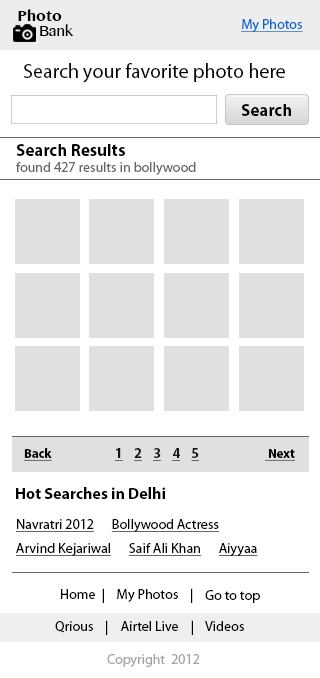
<style>
.page{position:relative;width:320px;height:678px;background:#ffffff}
.page>*{position:absolute;margin:0}
.t1{font:14.7px/15.5px "TamilMN-Bold";color:#000000}
.t2{font:14.7px/15.5px "TamilMN";color:#000000}
.t3{font:14px "MyriadPro-Regular";color:#0066cc;text-decoration:underline}
.t4{font:20px "MyriadPro-Regular";color:#000000}
.t5{font:17px "MyriadPro-Bold";color:#000000}
.t6{font:14px/16px "MyriadPro-Regular";color:#666666}
.t7{font:17px/20px "MyriadPro-Bold";color:#000000}
.t8{font:13px "MyriadPro-Bold";color:#000000;text-decoration:underline}
.t9{font:14px "MyriadPro-Bold";color:#000000;text-decoration:underline}
.t10{font:16px "MyriadPro-Bold";color:#000000}
.t11{font:14px/24px "MyriadPro-Regular";color:#000000;text-decoration:underline}
.t12{font:14px "MyriadPro-Regular";color:#000000}
.t13{font:14px "MyriadPro-Regular";color:#a3a3a3}
</style>
<div class="page">
<p class="t1" style="left:18px;top:9px;width:56px;height:27px">Photo<br><span class="t2">     Bank</span></p>
<p class="t3" style="left:241px;top:19px;width:62px;height:13px">My Photos</p>
<p class="t4" style="left:24px;top:63px;width:261px;height:20px">Search your favorite photo here</p>
<p class="t5" style="left:241px;top:104px;width:50px;height:12px">Search</p>
<p class="t6" style="left:16px;top:144px;width:180px;height:31px"><span class="t7">Search Results <br></span>found 427 results in bollywood</p>
<p class="t8" style="left:24px;top:448px;width:28px;height:13px">Back</p>
<p class="t9" style="left:115px;top:448px;width:85px;height:13px">1    2    3    4    5</p>
<p class="t8" style="left:265px;top:449px;width:30px;height:12px">Next</p>
<p class="t10" style="left:16px;top:487px;width:149px;height:12px">Hot Searches in Delhi</p>
<p class="t11" style="left:16px;top:519px;width:242px;height:37px">Navratri 2012      Bollywood Actress     <br>Arvind Kejariwal      Saif Ali Khan      Aiyyaa</p>
<p class="t12" style="left:61px;top:588px;width:132px;height:15px">Home  |    My Photos    |</p>
<p class="t12" style="left:205px;top:590px;width:55px;height:13px">Go to top</p>
<p class="t12" style="left:55px;top:620px;width:189px;height:15px">Qrious    |    Airtel Live    |    Videos</p>
<p class="t13" style="left:107px;top:654px;width:93px;height:13px">Copyright  2012</p>
</div>
